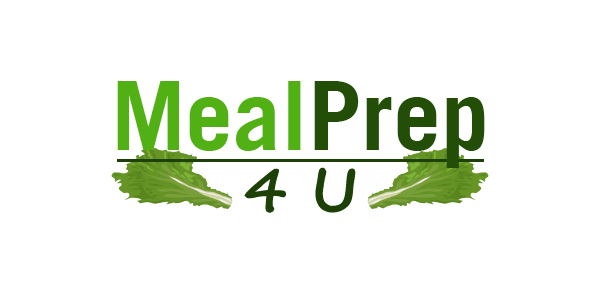
<style>
.page{position:relative;width:600px;height:300px;background:#ffffff}
.page>*{position:absolute;margin:0}
.t1{font:96px "TradeGothicLT-Bold";color:#50b014}
.t2{font:96px "TradeGothicLT-Bold";color:#224e07}
.t3{font:60px "SegoePrint-Bold";color:#1c4005}
</style>
<div class="page">
<p class="t1" style="left:117px;top:81px;width:368px;height:87px">Meal<span class="t2">Prep</span></p>
<p class="t3" style="left:244px;top:167px;width:112px;height:46px">4 U</p>
</div>
